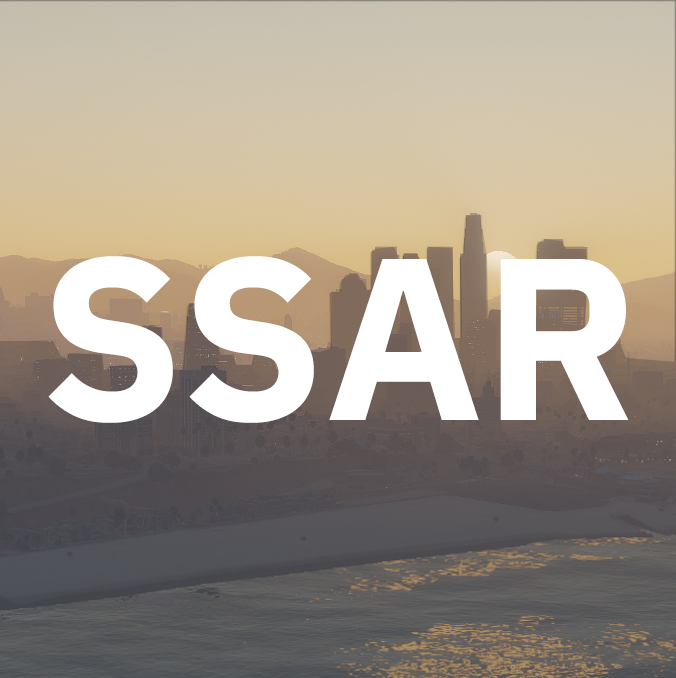
<style>
.page{position:relative;width:676px;height:678px}
.page>*{position:absolute;margin:0}
.t1{font:230.7px "IBMPlexSans-Bold";color:#ffffff}
</style>
<div class="page">
<p class="t1" style="left:48px;top:256px;width:581px;height:167px">SSAR</p>
</div>
